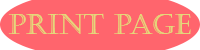
<style>
.page{position:relative;width:200px;height:50px;background:#ff656d}
.page>*{position:absolute;margin:0}
.t1{font:28px "Castellar";color:#e4d87a}
</style>
<div class="page">
<p class="t1" style="left:8px;top:13px;width:183px;height:21px">Print Page</p>
</div>
